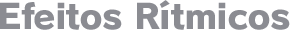
<style>
.page{position:relative;width:290px;height:30px;background:#ffffff}
.page>*{position:absolute;margin:0}
.t1{font:34px "RodinPro-EB";letter-spacing:-0.027em;color:#8b8c92;scale:1.06 1}
</style>
<div class="page">
<p class="t1" style="left:0px;top:0px;width:290px;height:30px">Efeitos Rítmicos</p>
</div>
